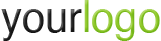
<style>
.page{position:relative;width:161px;height:41px;background:#ffffff}
.page>*{position:absolute;margin:0}
.t1{font:43.8px "Helvetica";color:#222222;scale:0.95 1}
.t2{font:43.8px "Helvetica";color:#8fc829;scale:0.95 1}
</style>
<div class="page">
<p class="t1" style="left:1px;top:0px;width:159px;height:41px">your<span class="t2">logo</span></p>
</div>
